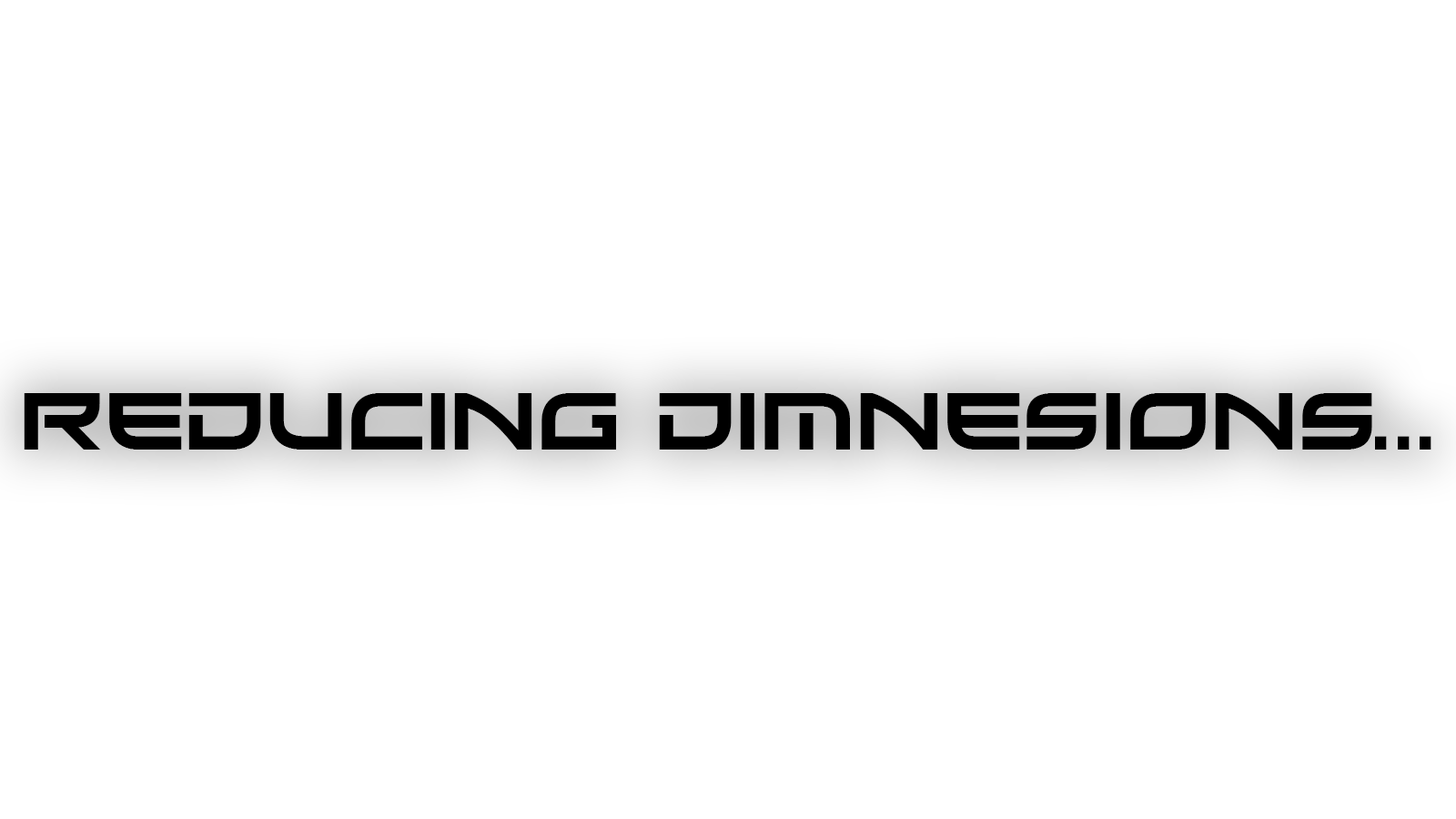
<style>
.page{position:relative;width:1456px;height:819px;background:#ffffff}
.page>*{position:absolute;margin:0}
.t1{font:80.9px "Xirod-Regular";color:#000000}
</style>
<div class="page">
<p class="t1" style="left:24px;top:393px;width:1407px;height:57px">Reducing Dimnesions...</p>
</div>
